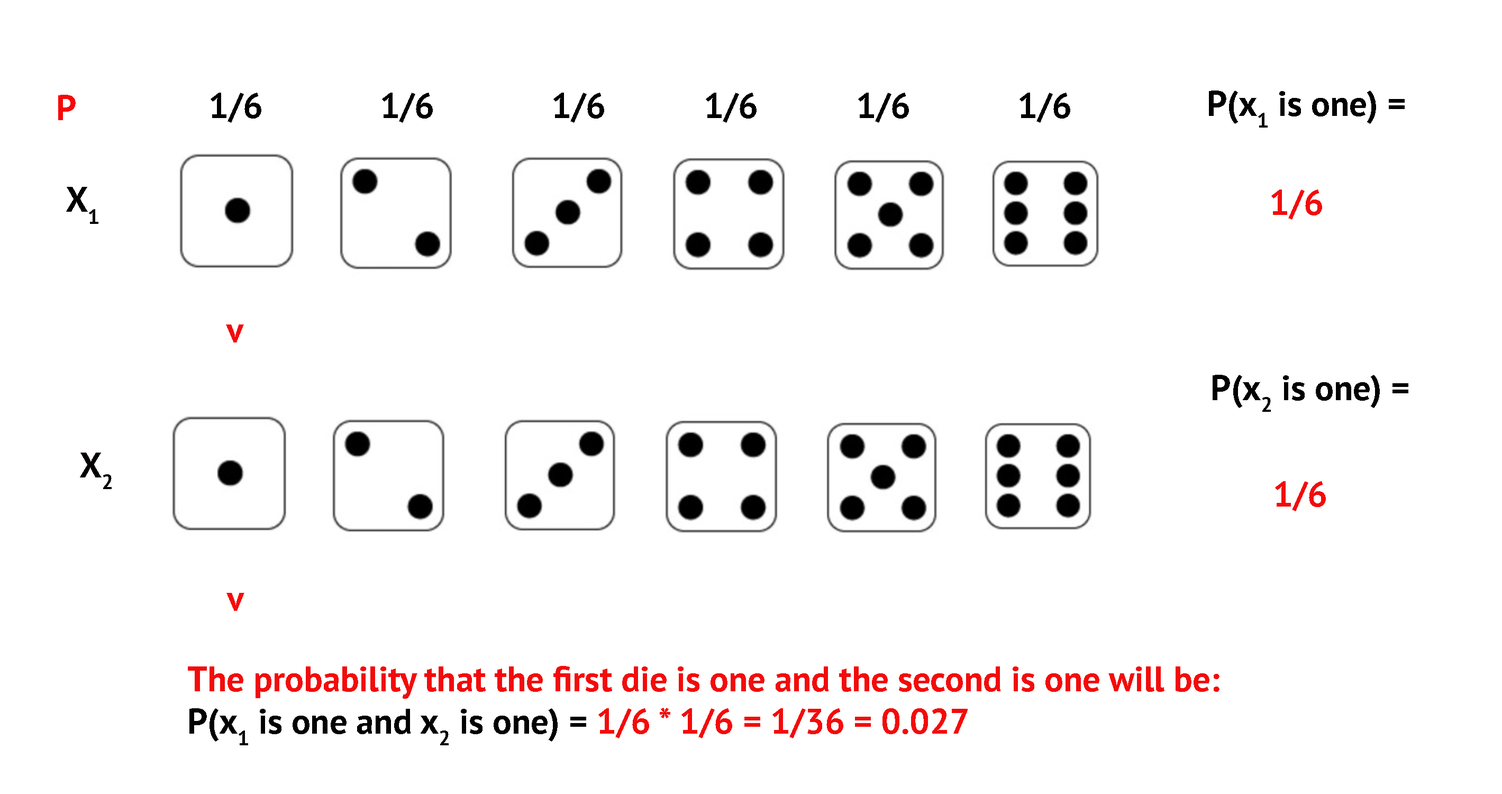
<style>
.page{position:relative;width:1502px;height:794px;background:#ffffff}
.page>*{position:absolute;margin:0}
.t1{font:35.3px "PTSans-Bold";color:#f60808}
.t2{font:35.3px "PTSans-Bold";color:#000000}
.t3{font:35.3px "PTSans-Bold";color:#010101}
.t4{font:35.3px "PTSans-Bold";color:#020000}
.t5{font:35.3px "PTSans-Bold";color:#f30b0b}
.t6{font:35.3px "PTSans-Bold";color:#040000}
.t7{font:35.3px "PTSans-Bold";color:#f60a0a}
</style>
<div class="page">
<p class="t1" style="left:58px;top:95px;width:18px;height:25px">P</p>
<p class="t2" style="left:211px;top:93px;width:859px;height:30px">1/6       1/6       1/6      1/6      1/6       1/6</p>
<p class="t3" style="left:1209px;top:90px;width:196px;height:38px">P(x1 is one) =</p>
<p class="t4" style="left:66px;top:187px;width:32px;height:37px">X1</p>
<p class="t5" style="left:1272px;top:189px;width:50px;height:31px">1/6</p>
<p class="t5" style="left:226px;top:324px;width:18px;height:18px">v</p>
<p class="t3" style="left:1213px;top:375px;width:196px;height:37px">P(x2 is one) =</p>
<p class="t6" style="left:80px;top:452px;width:32px;height:37px">X2</p>
<p class="t5" style="left:1275px;top:481px;width:51px;height:30px">1/6</p>
<p class="t7" style="left:226px;top:593px;width:18px;height:18px">v</p>
<p class="t5" style="left:188px;top:666px;width:1032px;height:79px">The probability that the first die is one and the second is one will be: <br><span class="t3">P(x1 is one and x2 is one) = </span>1/6 * 1/6 = 1/36 = 0.027</p>
</div>
